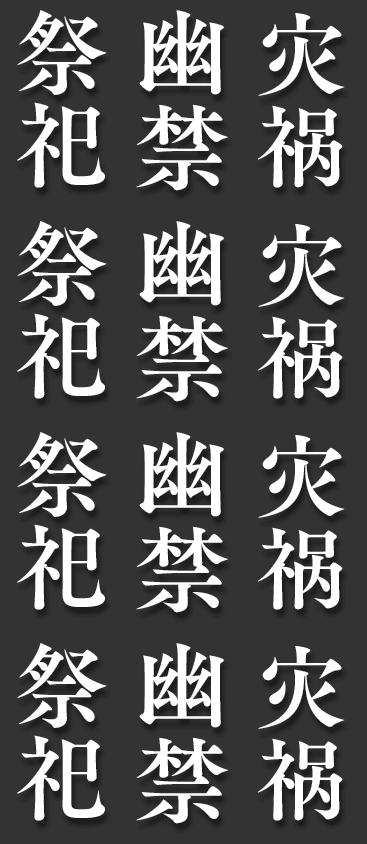
<style>
.page{position:relative;width:367px;height:844px;background:#333333}
.page>*{position:absolute;margin:0}
.t1{font:93px "FZFW-ZhuZiAOldMin-B--GB1-0";color:#ffffff}
.t2{font:94.4px "FZFW-ZhuZiAOldMin-B--GB1-0";color:#ffffff}
.t3{font:91.1px "FZFW-ZhuZiAOldMin-B--GB1-0";color:#ffffff}
</style>
<div class="page">
<p class="t1" style="left:17px;top:10px;width:90px;height:178px">祭祀</p>
<p class="t2" style="left:136px;top:10px;width:93px;height:181px">幽禁</p>
<p class="t3" style="left:257px;top:13px;width:88px;height:175px">灾祸</p>
<p class="t1" style="left:17px;top:221px;width:90px;height:178px">祭祀</p>
<p class="t2" style="left:136px;top:221px;width:93px;height:181px">幽禁</p>
<p class="t3" style="left:257px;top:224px;width:88px;height:175px">灾祸</p>
<p class="t1" style="left:17px;top:432px;width:90px;height:178px">祭祀</p>
<p class="t2" style="left:136px;top:432px;width:93px;height:181px">幽禁</p>
<p class="t3" style="left:257px;top:435px;width:88px;height:175px">灾祸</p>
<p class="t1" style="left:17px;top:643px;width:90px;height:178px">祭祀</p>
<p class="t2" style="left:136px;top:643px;width:93px;height:181px">幽禁</p>
<p class="t3" style="left:257px;top:646px;width:88px;height:175px">灾祸</p>
</div>
